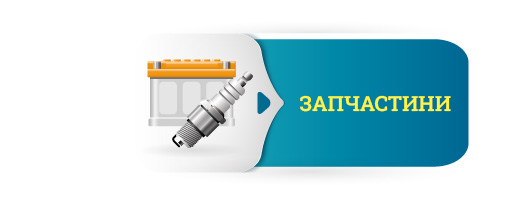
<style>
.page{position:relative;width:517px;height:197px;background:#ffffff}
.page>*{position:absolute;margin:0}
.t1{font:20.9px "RobotoSlab-SemiBold";color:#fff343}
</style>
<div class="page">
<p class="t1" style="left:300px;top:95px;width:151px;height:17px">ЗАПЧАСТИНИ</p>
</div>
